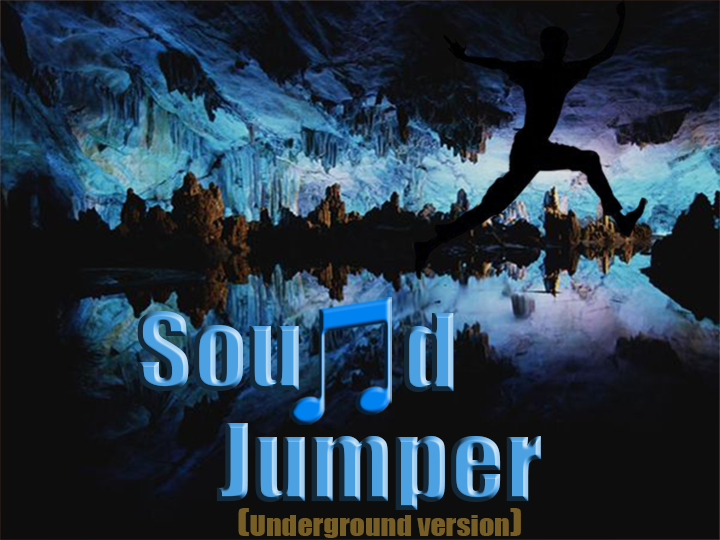
<style>
.page{position:relative;width:720px;height:540px;background:#0d0d0d}
.page>*{position:absolute;margin:0}
.t1{font:98.8px "Impact";scale:1.1 1}
.t2{font:27.4px "Impact";color:#775d26;scale:1.1 1}
.t3{font:36.5px "Impact";color:#775d26;scale:1.1 1}
</style>
<div class="page">
<p class="t1" style="left:137px;top:311px;width:162px;height:80px">Sou</p>
<p class="t1" style="left:404px;top:313px;width:50px;height:79px">d</p>
<p class="t1" style="left:216px;top:423px;width:325px;height:87px">Jumper</p>
<p class="t2" style="left:238px;top:508px;width:283px;height:30px"><span class="t3">(</span>Underground version<span class="t3">)</span></p>
</div>
